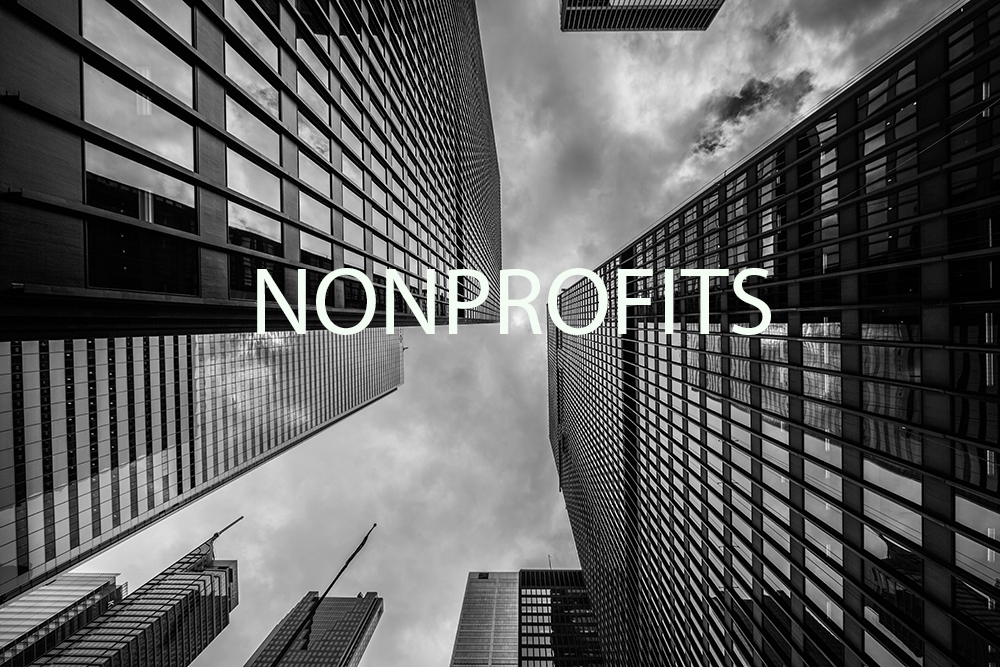
<style>
.page{position:relative;width:1000px;height:667px}
.page>*{position:absolute;margin:0}
.t1{font:96px "MyriadPro-Regular";color:#f3fdf4}
</style>
<div class="page">
<p class="t1" style="left:257px;top:268px;width:514px;height:67px">NONPROFITS</p>
</div>
